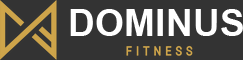
<style>
.page{position:relative;width:243px;height:60px;background:#333333}
.page>*{position:absolute;margin:0}
.t1{font:37.5px "Arial-BoldMT";color:#ffffff}
</style>
<div class="page">
<p class="t1" style="left:70px;top:9px;width:173px;height:27px">DOMINUS</p>
</div>
